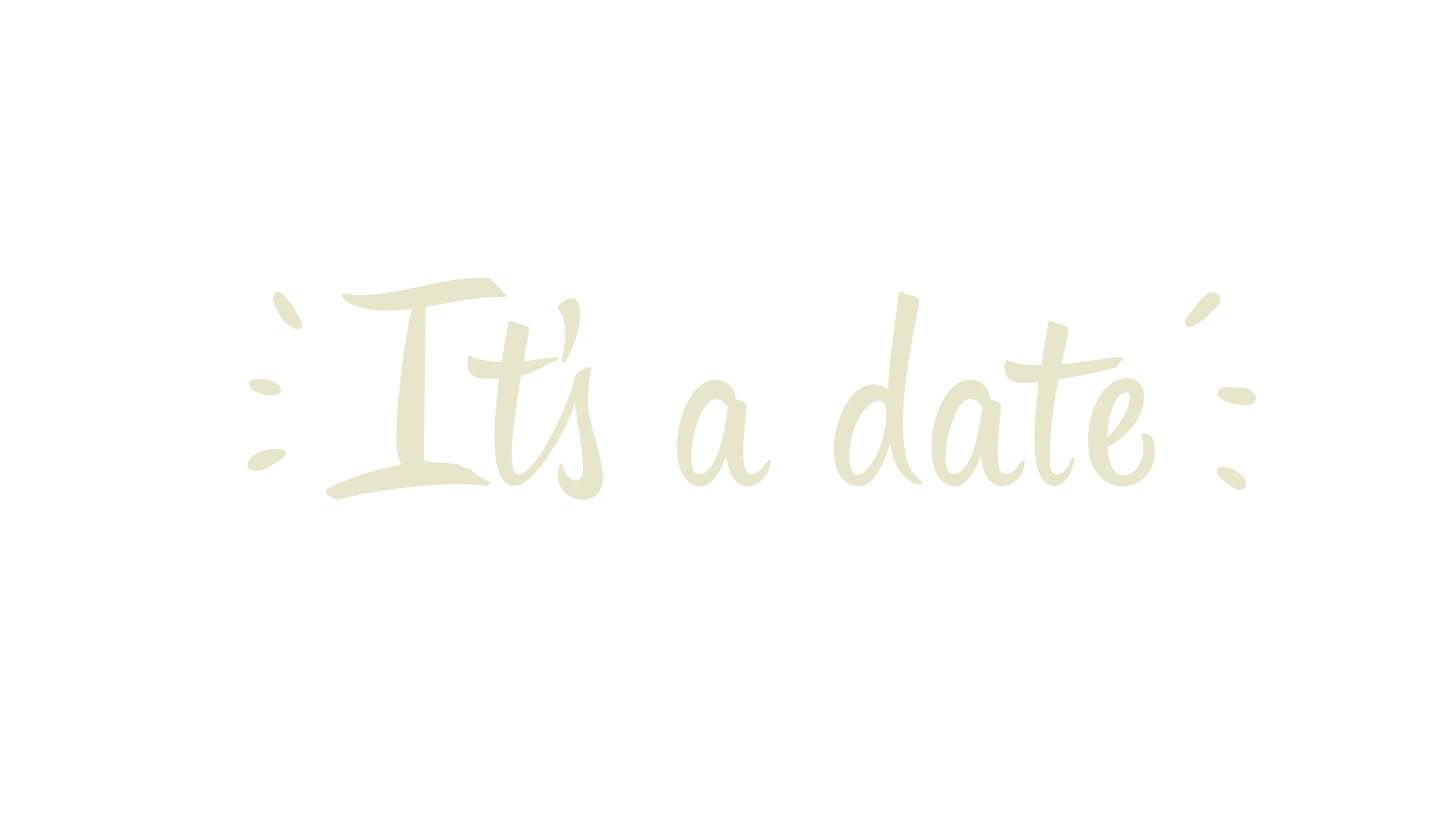
<style>
.page{position:relative;width:1456px;height:819px;background:#ffffff}
.page>*{position:absolute;margin:0}
.t1{font:58.4px/486.6px "HipsterScriptPro";letter-spacing:0.05em;color:#e7e6cb}
</style>
<div class="page">
<p class="t1" style="left:325px;top:278px;width:830px;height:222px">It’s a date</p>
</div>
